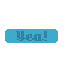
<style>
.page{position:relative;width:64px;height:64px;background:#ffffff}
.page>*{position:absolute;margin:0}
.t1{font:14px "Superscript";color:#3281a2}
</style>
<div class="page">
<p class="t1" style="left:16px;top:31px;width:31px;height:10px">Yea!</p>
</div>
